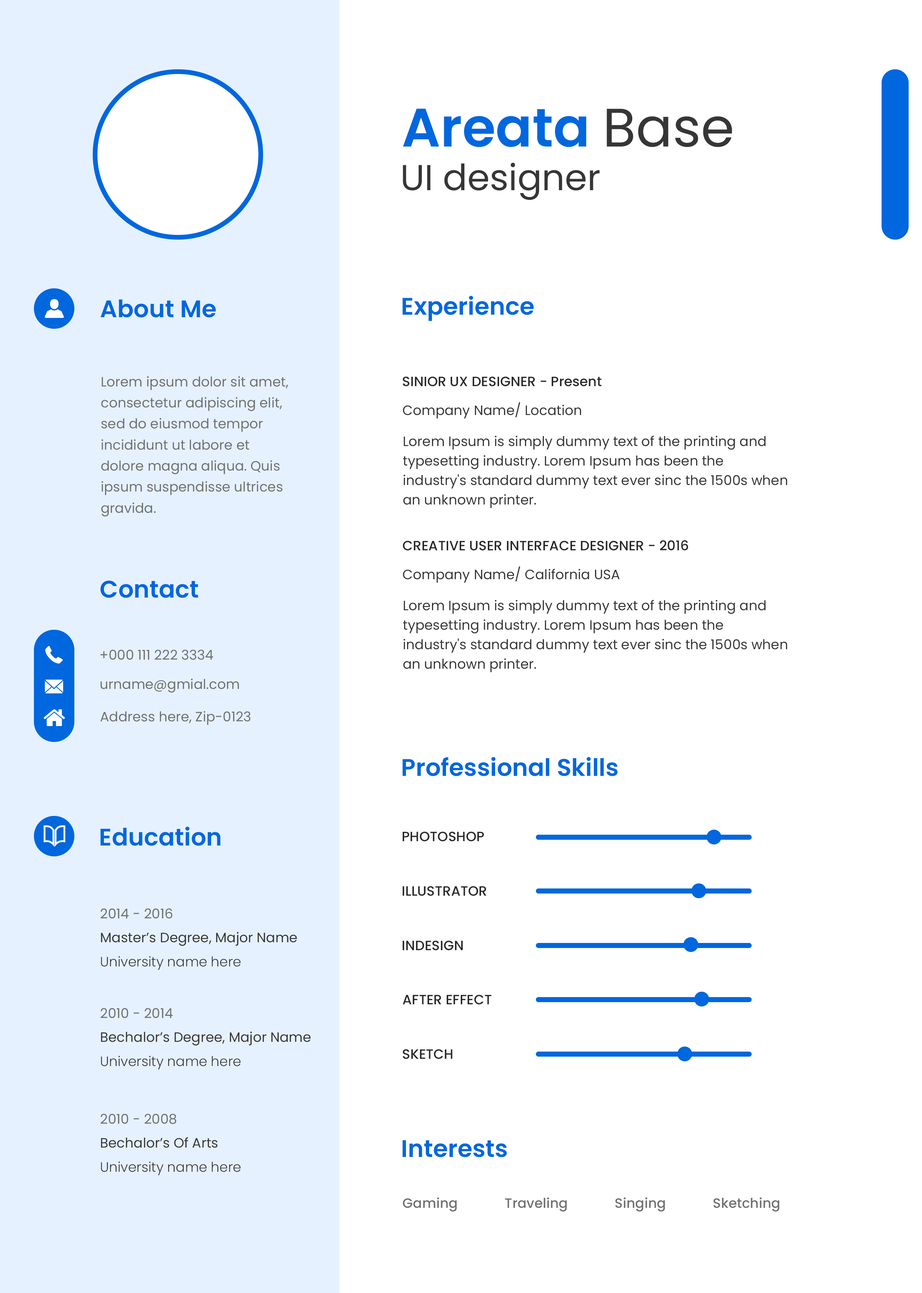
<style>
.page{position:relative;width:922px;height:1293px;background:#ffffff}
.page>*{position:absolute;margin:0}
.t1{font:54.1px "Poppins-SemiBold";color:#0067de}
.t2{font:54.1px "Poppins-Regular";color:#363636}
.t3{font:36.1px "Poppins-Regular";color:#363636}
.t4{font:24.1px "Poppins-SemiBold";color:#0067de}
.t5{font:13.5px/21.1px "Poppins-Regular";color:#707070}
.t6{font:13.5px "Poppins-Medium";color:#282828;text-transform:uppercase}
.t7{font:13.5px "Poppins-Medium";color:#282828}
.t8{font:13.5px "Poppins-Regular";color:#353535}
.t9{font:13.5px/19.5px "Poppins-Regular";color:#353535}
.t10{font:13.5px "Poppins-Regular";color:#707070}
.t11{font:13.5px/24.1px "Poppins-Regular";color:#363636}
.t12{font:13.5px/24.1px "Poppins-Regular";color:#707070}
.t13{font:13.5px/24.1px "Poppins-Light";color:#363636}
.t14{font:13.5px "Poppins-Medium";color:#707070}
</style>
<div class="page">
<p class="t1" style="left:403px;top:109px;width:329px;height:38px">Areata <span class="t2">Base</span></p>
<p class="t3" style="left:403px;top:163px;width:197px;height:37px">UI designer</p>
<p class="t4" style="left:100px;top:299px;width:116px;height:19px">About Me</p>
<p class="t4" style="left:402px;top:296px;width:132px;height:25px">Experience</p>
<p class="t5" style="left:101px;top:376px;width:187px;height:140px">Lorem ipsum dolor sit amet, consectetur adipiscing elit, sed do eiusmod tempor incididunt ut labore et dolore magna aliqua. Quis ipsum suspendisse ultrices gravida.</p>
<p class="t6" style="left:403px;top:376px;width:199px;height:11px">sinior ux designer - <span class="t7">Present</span></p>
<p class="t8" style="left:403px;top:402px;width:178px;height:17px">Company Name/ Location</p>
<p class="t9" style="left:403px;top:436px;width:385px;height:72px">Lorem Ipsum is simply dummy text of the printing and typesetting industry. Lorem Ipsum has been the industry's standard dummy text ever sinc the 1500s when an unknown printer.</p>
<p class="t6" style="left:403px;top:540px;width:285px;height:11px">creative user interface designer - 2016</p>
<p class="t8" style="left:403px;top:566px;width:217px;height:17px">Company Name/ California USA</p>
<p class="t4" style="left:100px;top:580px;width:98px;height:18px">Contact</p>
<p class="t9" style="left:403px;top:600px;width:385px;height:72px">Lorem Ipsum is simply dummy text of the printing and typesetting industry. Lorem Ipsum has been the industry's standard dummy text ever sinc the 1500s when an unknown printer.</p>
<p class="t10" style="left:100px;top:650px;width:113px;height:10px">+000 111 222 3334</p>
<p class="t10" style="left:100px;top:679px;width:139px;height:14px">urname@gmial.com</p>
<p class="t10" style="left:100px;top:711px;width:150px;height:14px">Address here, Zip-0123</p>
<p class="t4" style="left:402px;top:757px;width:216px;height:19px">Professional Skills</p>
<p class="t4" style="left:100px;top:826px;width:121px;height:20px">Education</p>
<p class="t6" style="left:402px;top:832px;width:82px;height:10px">photoshop</p>
<p class="t6" style="left:402px;top:886px;width:85px;height:10px">illustrator</p>
<p class="t11" style="left:101px;top:908px;width:196px;height:62px"><span class="t12">2014 - 2016<br></span>Master’s Degree, Major Name<br><span class="t13">University name here</span></p>
<p class="t6" style="left:402px;top:941px;width:61px;height:10px">indesign</p>
<p class="t6" style="left:403px;top:995px;width:89px;height:10px">after effect</p>
<p class="t11" style="left:101px;top:1008px;width:210px;height:62px"><span class="t12">2010 - 2014<br></span>Bechalor’s Degree, Major Name<br><span class="t13">University name here</span></p>
<p class="t6" style="left:403px;top:1049px;width:50px;height:10px">sketch</p>
<p class="t13" style="left:101px;top:1114px;width:140px;height:61px"><span class="t12">2010 - 2008<br></span><span class="t11">Bechalor’s Of Arts<br></span>University name here</p>
<p class="t4" style="left:402px;top:1140px;width:105px;height:17px">Interests</p>
<p class="t14" style="left:403px;top:1197px;width:54px;height:15px">Gaming</p>
<p class="t14" style="left:505px;top:1197px;width:62px;height:15px">Traveling</p>
<p class="t14" style="left:615px;top:1197px;width:50px;height:15px">Singing</p>
<p class="t14" style="left:714px;top:1197px;width:66px;height:15px">Sketching</p>
</div>
